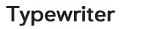
<style>
.page{position:relative;width:142px;height:29px;background:#ffffff}
.page>*{position:absolute;margin:0}
.t1{font:21px "Prelude-Medium";color:#26292a;font-weight:bold}
</style>
<div class="page">
<p class="t1" style="left:6px;top:6px;width:109px;height:20px">Typewriter</p>
</div>
